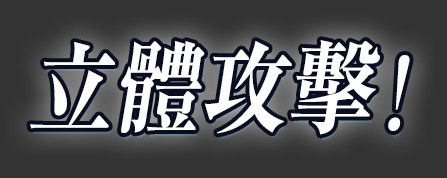
<style>
.page{position:relative;width:447px;height:178px;background:#333333}
.page>*{position:absolute;margin:0}
.t1{font:100px "RyuminPr6N-ExBold";color:#ffffff;font-style:italic;scale:0.87 1}
.t2{font:100px "DFKaiShu-SB-Estd-BF";color:#ffffff;font-style:italic;scale:0.87 1}
</style>
<div class="page">
<p class="t1" style="left:30px;top:40px;width:380px;height:95px">立體攻擊<span class="t2">!</span></p>
</div>
